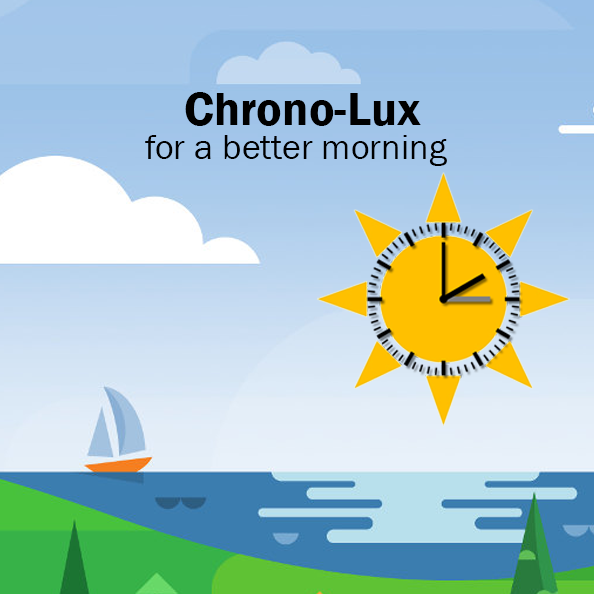
<style>
.page{position:relative;width:594px;height:594px}
.page>*{position:absolute;margin:0}
.t1{font:48px "FranklinGothic-Demi";color:#000000}
.t2{font:36px "FranklinGothic-Book";color:#000000}
</style>
<div class="page">
<p class="t1" style="left:185px;top:92px;width:236px;height:34px">Chrono-Lux</p>
<p class="t2" style="left:145px;top:135px;width:302px;height:31px">for a better morning</p>
</div>
